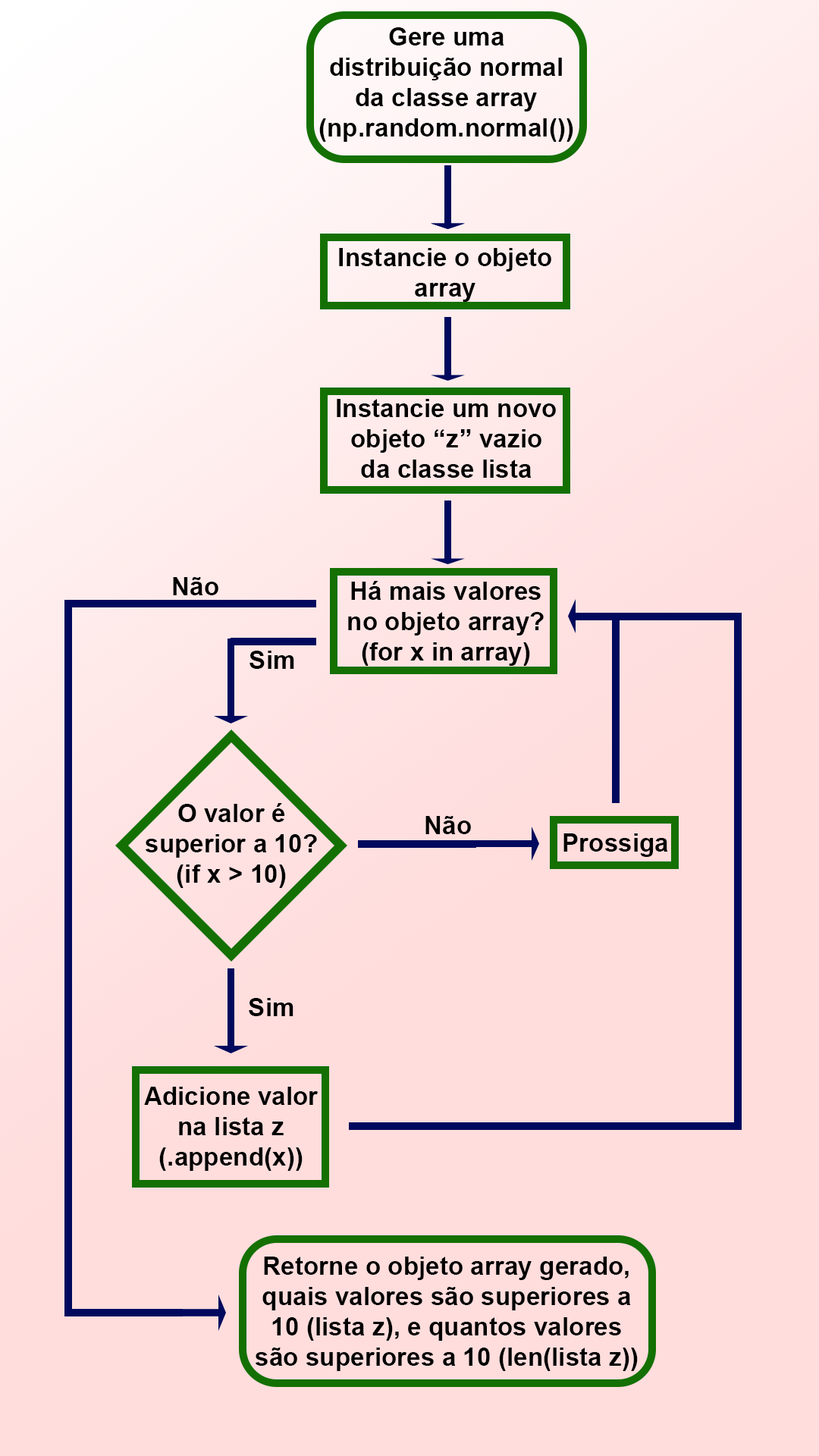
<style>
.page{position:relative;width:819px;height:1456px;background:#ffdddd}
.page>*{position:absolute;margin:0}
.t1{font:25.3px "Arial-BoldMT";color:#000000}
</style>
<div class="page">
<p class="t1" style="left:319px;top:27px;width:254px;height:115px;text-align:center">Gere uma<br>distribuição normal<br>da classe array<br>(np.random.normal())</p>
<p class="t1" style="left:339px;top:248px;width:212px;height:54px;text-align:center">Instancie o objeto<br>array</p>
<p class="t1" style="left:337px;top:399px;width:219px;height:79px;text-align:center">Instancie um novo<br>objeto “z ” vazio<br>da classe lista</p>
<p class="t1" style="left:173px;top:577px;width:45px;height:18px">Não</p>
<p class="t1" style="left:348px;top:581px;width:196px;height:85px;text-align:center">Há mais valores<br>no objeto array?<br>(for x in array)</p>
<p class="t1" style="left:249px;top:651px;width:45px;height:18px">Sim</p>
<p class="t1" style="left:145px;top:803px;width:172px;height:85px;text-align:center">O valor é<br>superior a 10?<br>(if x &gt; 10)</p>
<p class="t1" style="left:425px;top:816px;width:46px;height:18px">Não</p>
<p class="t1" style="left:563px;top:833px;width:105px;height:24px">Prossiga</p>
<p class="t1" style="left:249px;top:998px;width:44px;height:18px">Sim</p>
<p class="t1" style="left:144px;top:1087px;width:174px;height:84px;text-align:center">Adicione valor<br>na lista z<br>(.append(x))</p>
<p class="t1" style="left:255px;top:1257px;width:383px;height:114px;text-align:center">Retorne o objeto array gerado,<br>quais valores são superiores a<br>10 (lista z), e quantos valores<br>são superiores a 10 (len(lista z))</p>
</div>
